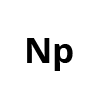
<style>
.page{position:relative;width:100px;height:100px;background:#ffffff}
.page>*{position:absolute;margin:0}
.t1{font:35px "OpenSans-Bold";color:#000000}
</style>
<div class="page">
<p class="t1" style="left:27px;top:38px;width:46px;height:33px">Np</p>
</div>
